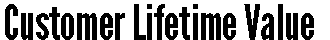
<style>
.page{position:relative;width:330px;height:40px;background:#ffffff}
.page>*{position:absolute;margin:0}
.t1{font:48px "LeagueGothic";letter-spacing:-0.01em;color:#000000}
</style>
<div class="page">
<p class="t1" style="left:5px;top:4px;width:309px;height:36px">Customer Lifetime Value</p>
</div>
